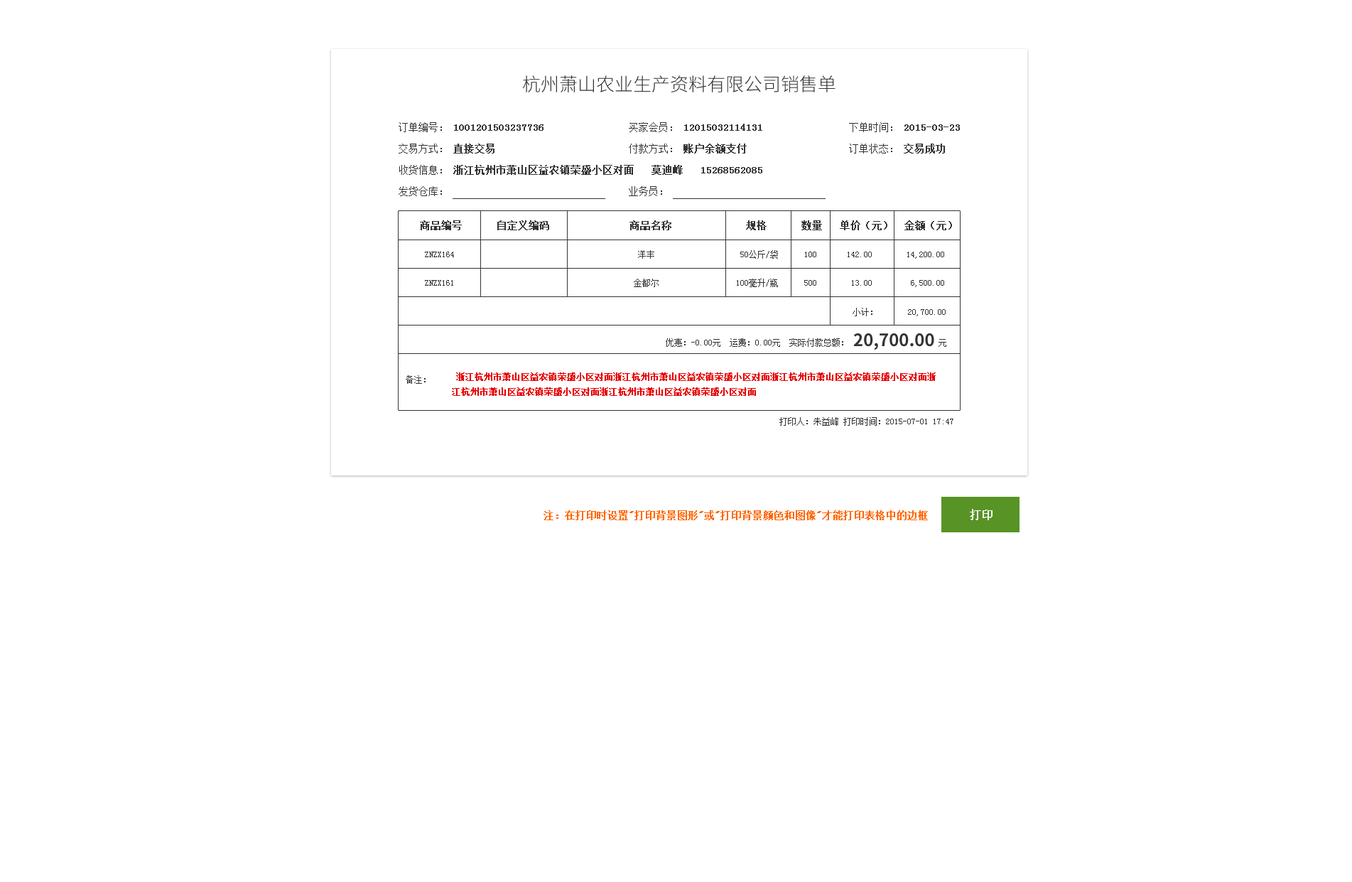
<style>
.page{position:relative;width:1352px;height:882px;background:#ffffff}
.page>*{position:absolute;margin:0}
.t1{font:18.5px "SourceHanSansCN-Light";color:#333333}
.t2{font:9.9px "SimSun";color:#333333;font-weight:bold}
.t3{font:9.9px "SimSun";color:#333333}
.t4{font:8.5px "SimSun";color:#333333}
.t5{font:17.1px "SourceHanSansCN-Bold";color:#333333}
.t6{font:8.5px "SimSun";color:#e70000;font-weight:bold}
.t7{font:8.5px "SimSun";color:#e70000}
.t8{font:11.4px "SimSun";color:#ffffff;font-weight:bold}
.t9{font:9.9px "SimSun";color:#ff6600;font-weight:bold}
</style>
<div class="page">
<p class="t1" style="left:523px;top:75px;width:313px;height:17px">杭州萧山农业生产资料有限公司销售单</p>
<p class="t2" style="left:399px;top:122px;width:145px;height:10px"><span class="t3">订单编号： </span>1001201503237736</p>
<p class="t2" style="left:629px;top:122px;width:133px;height:10px"><span class="t3">买家会员： </span>12015032114131</p>
<p class="t2" style="left:849px;top:122px;width:111px;height:10px"><span class="t3">下单时间： </span>2015-03-23</p>
<p class="t3" style="left:399px;top:144px;width:96px;height:9px">交易方式： <span class="t2">直接交易</span></p>
<p class="t2" style="left:629px;top:144px;width:118px;height:9px"><span class="t3">付款方式： </span>账户余额支付</p>
<p class="t3" style="left:849px;top:144px;width:96px;height:9px">订单状态： <span class="t2">交易成功</span></p>
<p class="t2" style="left:399px;top:165px;width:363px;height:10px"><span class="t3">收货信息： </span>浙江杭州市萧山区益农镇荣盛小区对面   莫迪峰   15268562085</p>
<p class="t3" style="left:399px;top:186px;width:43px;height:10px">发货仓库：</p>
<p class="t3" style="left:629px;top:186px;width:33px;height:10px">业务员：</p>
<p class="t2" style="left:420px;top:220px;width:532px;height:10px">商品编号      自定义编码              商品名称             规格      数量   单价（元）  金额（元）</p>
<p class="t4" style="left:425px;top:250px;width:519px;height:9px">ZNZX164                                           洋丰                    50公斤/袋      100       142.00        14,200.00</p>
<p class="t4" style="left:425px;top:279px;width:519px;height:8px">ZNZX161                                          金都尔                  100毫升/瓶      500        13.00         6,500.00</p>
<p class="t4" style="left:853px;top:308px;width:93px;height:8px">小计：       20,700.00</p>
<p class="t4" style="left:666px;top:338px;width:280px;height:9px">优惠：-0.00元  运费：0.00元  实际付款总额：                     元</p>
<p class="t5" style="left:854px;top:333px;width:80px;height:17px">20,700.00</p>
<p class="t4" style="left:406px;top:375px;width:20px;height:9px">备注：</p>
<p class="t6" style="left:452px;top:372px;width:484px;height:24px"><span class="t7"> </span>浙江杭州市萧山区益农镇荣盛小区对面浙江杭州市萧山区益农镇荣盛小区对面浙江杭州市萧山区益农镇荣盛小区对面浙<br>江杭州市萧山区益农镇荣盛小区对面浙江杭州市萧山区益农镇荣盛小区对面</p>
<p class="t4" style="left:780px;top:417px;width:174px;height:9px">打印人：朱益峰 打印时间：2015-07-01 17:47</p>
<p class="t8" style="left:970px;top:509px;width:23px;height:11px">打印</p>
<p class="t9" style="left:544px;top:510px;width:384px;height:10px">注：在打印时设置"打印背景图形"或"打印背景颜色和图像"才能打印表格中的边框</p>
</div>
